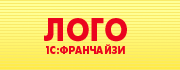
<style>
.page{position:relative;width:180px;height:70px;background:#f9ea69}
.page>*{position:absolute;margin:0}
.t1{font:10.7px "FuturisC-Bold";letter-spacing:0.02em;color:#eb041e;text-transform:uppercase;scale:0.9 1}
.t2{font:31.8px "FuturisC-Bold";letter-spacing:0.02em;color:#eb041e;text-transform:uppercase;scale:0.9 1}
</style>
<div class="page">
<p class="t1" style="left:44px;top:18px;width:83px;height:36px"><span class="t2">ЛОГО<br></span>1C:ФРАНЧАЙЗИ</p>
</div>
